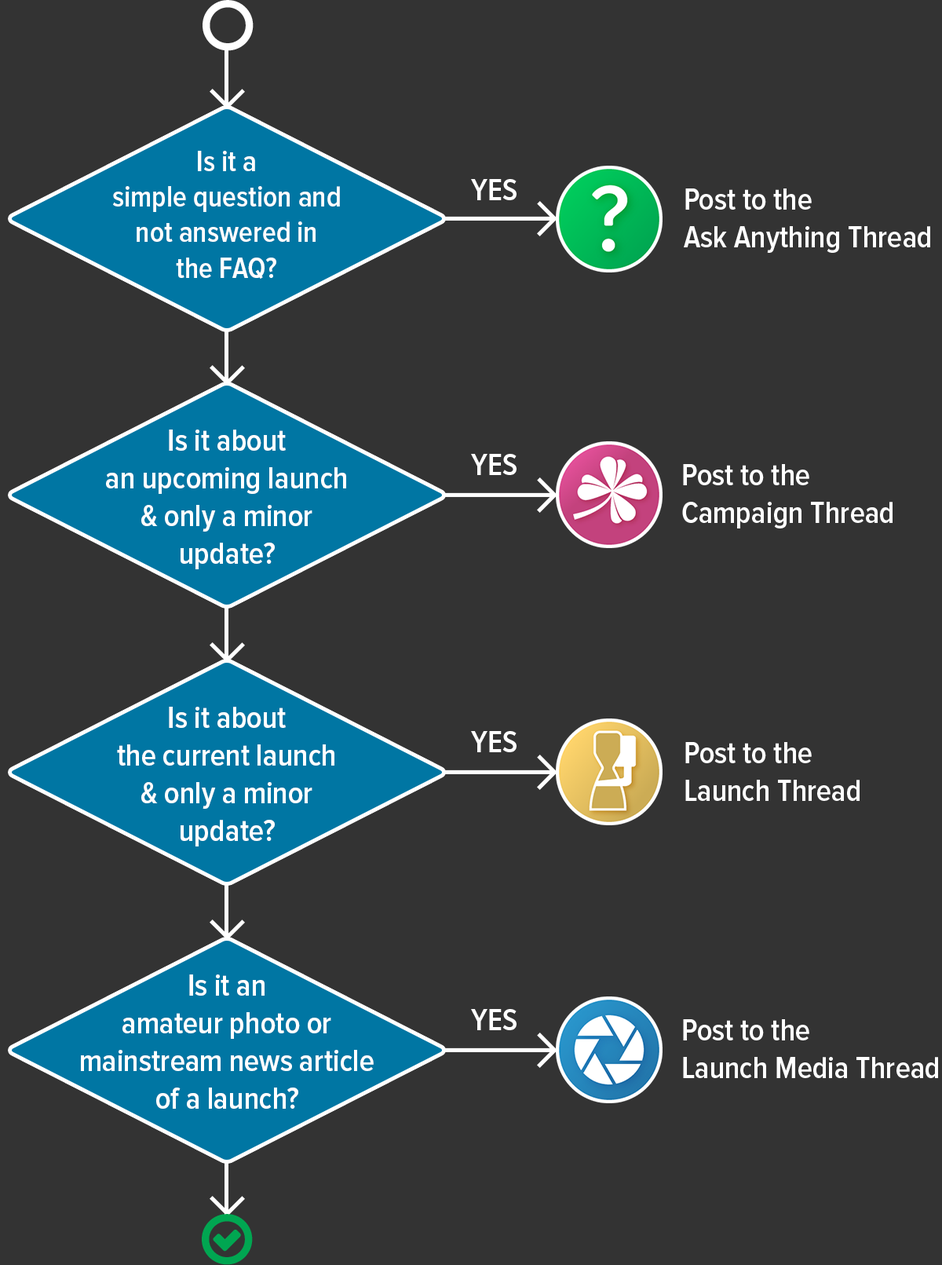
<style>
.page{position:relative;width:942px;height:1265px;background:#333333}
.page>*{position:absolute;margin:0}
.t1{font:29.7px "ProximaNovaCond-Semibold";color:#ffffff}
.t2{font:31.4px "ProximaNovaCond-Semibold";color:#ffffff}
</style>
<div class="page">
<p class="t1" style="left:113px;top:151px;width:227px;height:128px;text-align:center">Is it a simple question and not answered in <br>the FAQ?</p>
<p class="t2" style="left:471px;top:179px;width:46px;height:21px">YES</p>
<p class="t2" style="left:684px;top:188px;width:247px;height:65px">Post to the <br>Ask Anything Thread</p>
<p class="t2" style="left:106px;top:430px;width:240px;height:139px;text-align:center">Is it about an upcoming launch <br>&amp; only a minor <br>update?</p>
<p class="t2" style="left:471px;top:454px;width:46px;height:21px">YES</p>
<p class="t2" style="left:682px;top:464px;width:211px;height:65px">Post to the <br>Campaign Thread</p>
<p class="t2" style="left:117px;top:707px;width:218px;height:140px;text-align:center">Is it about the current launch <br>&amp; only a minor <br>update?</p>
<p class="t2" style="left:471px;top:731px;width:46px;height:21px">YES</p>
<p class="t2" style="left:686px;top:742px;width:174px;height:59px">Post to the <br>Launch Thread</p>
<p class="t2" style="left:81px;top:975px;width:293px;height:134px;text-align:center">Is it an amateur photo or mainstream news article of a launch?</p>
<p class="t2" style="left:471px;top:1009px;width:46px;height:21px">YES</p>
<p class="t2" style="left:683px;top:1019px;width:256px;height:59px">Post to the <br>Launch Media Thread</p>
</div>
